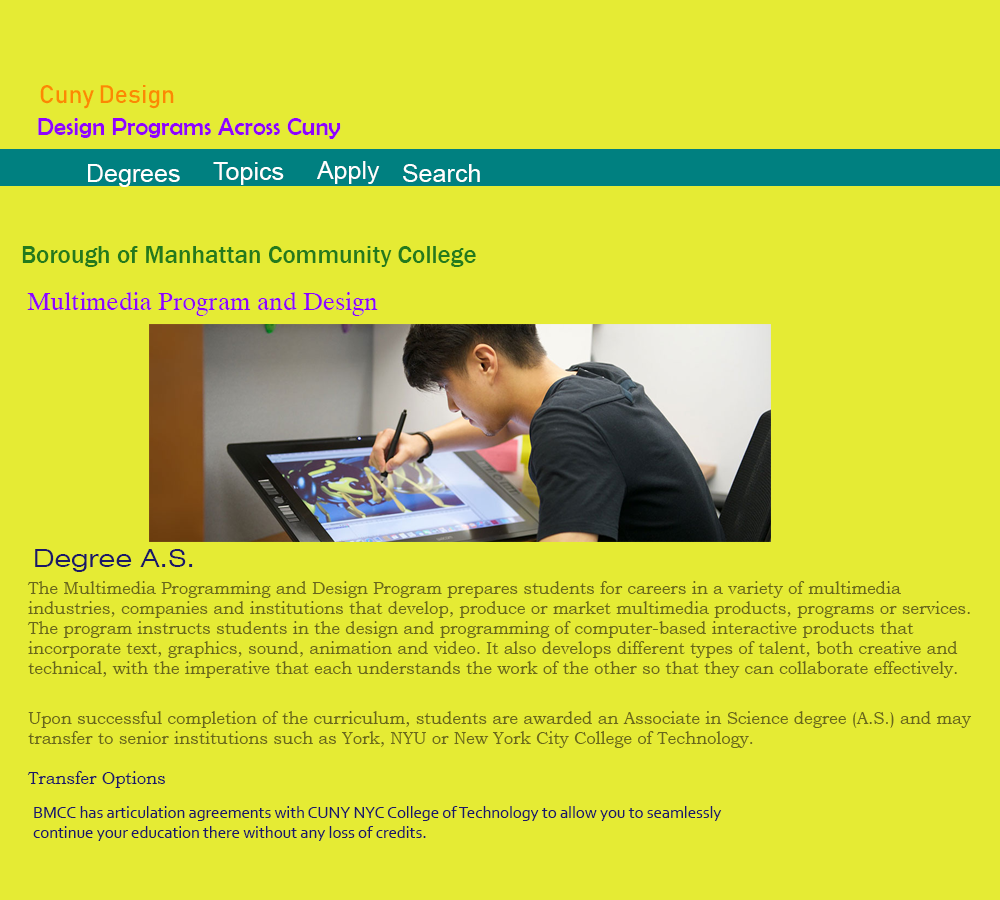
<style>
.page{position:relative;width:1000px;height:900px;background:#e5eb34}
.page>*{position:absolute;margin:0}
.t1{font:25px "Bahnschrift";color:#fc8803}
.t2{font:25px "BerlinSansFB-Reg";color:#9003fc}
.t3{font:25px "ArialMT";color:#ffffff}
.t4{font:25px "FranklinGothic-Medium";color:#247a1d}
.t5{font:25px "Dutch801BT-Roman";color:#9003fc}
.t6{font:25px "Swiss721BT-RomanExtended";color:#1b1866}
.t7{font:16.7px "BookmanOldStyle";color:#69671c}
.t8{font:16.7px "BookmanOldStyle";color:#1b1866}
.t9{font:16.7px "Corbel";color:#1b1866}
</style>
<div class="page">
<p class="t1" style="left:40px;top:85px;width:134px;height:24px">Cuny Design</p>
<p class="t2" style="left:38px;top:118px;width:303px;height:21px">Design Programs Across Cuny</p>
<p class="t3" style="left:317px;top:161px;width:63px;height:23px">Apply</p>
<p class="t3" style="left:88px;top:164px;width:92px;height:23px">Degrees</p>
<p class="t3" style="left:213px;top:162px;width:71px;height:23px">Topics</p>
<p class="t3" style="left:403px;top:164px;width:77px;height:18px">Search</p>
<p class="t4" style="left:22px;top:246px;width:454px;height:21px">Borough of Manhattan Community College</p>
<p class="t5" style="left:27px;top:292px;width:351px;height:24px">Multimedia Program and Design</p>
<p class="t6" style="left:35px;top:549px;width:158px;height:23px">Degree A.S.</p>
<p class="t7" style="left:27px;top:581px;width:945px;height:207px">The Multimedia Programming and Design Program prepares students for careers in a variety of multimedia industries, companies and institutions that develop, produce or market multimedia products, programs or services. The program instructs students in the design and programming of computer-based interactive products that incorporate text, graphics, sound, animation and video. It also develops different types of talent, both creative and technical, with the imperative that each understands the work of the other so that they can collaborate effectively.<br><br>Upon successful completion of the curriculum, students are awarded an Associate in Science degree (A.S.) and may transfer to senior institutions such as York, NYU or New York City College of Technology.<br><span class="t8"><br>Transfer Options</span></p>
<p class="t9" style="left:33px;top:806px;width:689px;height:35px">BMCC has articulation agreements with CUNY NYC College of Technology to allow you to seamlessly continue your education there without any loss of credits.</p>
</div>
